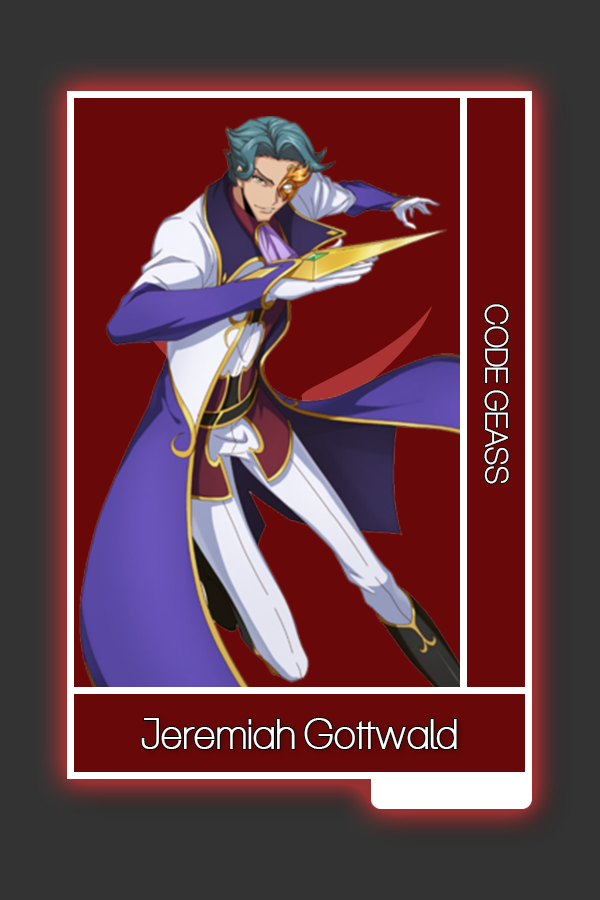
<style>
.page{position:relative;width:600px;height:900px;background:#680808}
.page>*{position:absolute;margin:0}
.t1{font:31.2px "Aliquam";color:#ffffff}
.t2{font:43.2px "Aliquam";color:#ffffff}
</style>
<div class="page">
<p class="t1" style="left:484px;top:304px;width:25px;height:180px;rotate:90deg">CODE GEASS</p>
<p class="t2" style="left:141px;top:718px;width:316px;height:31px">Jeremiah Gottwald</p>
</div>
